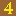
<style>
.page{position:relative;width:16px;height:16px;background:#996633}
.page>*{position:absolute;margin:0}
.t1{font:18px "Sylfaen";color:#f5e814}
</style>
<div class="page">
<p class="t1" style="left:4px;top:2px;width:9px;height:12px">4</p>
</div>
